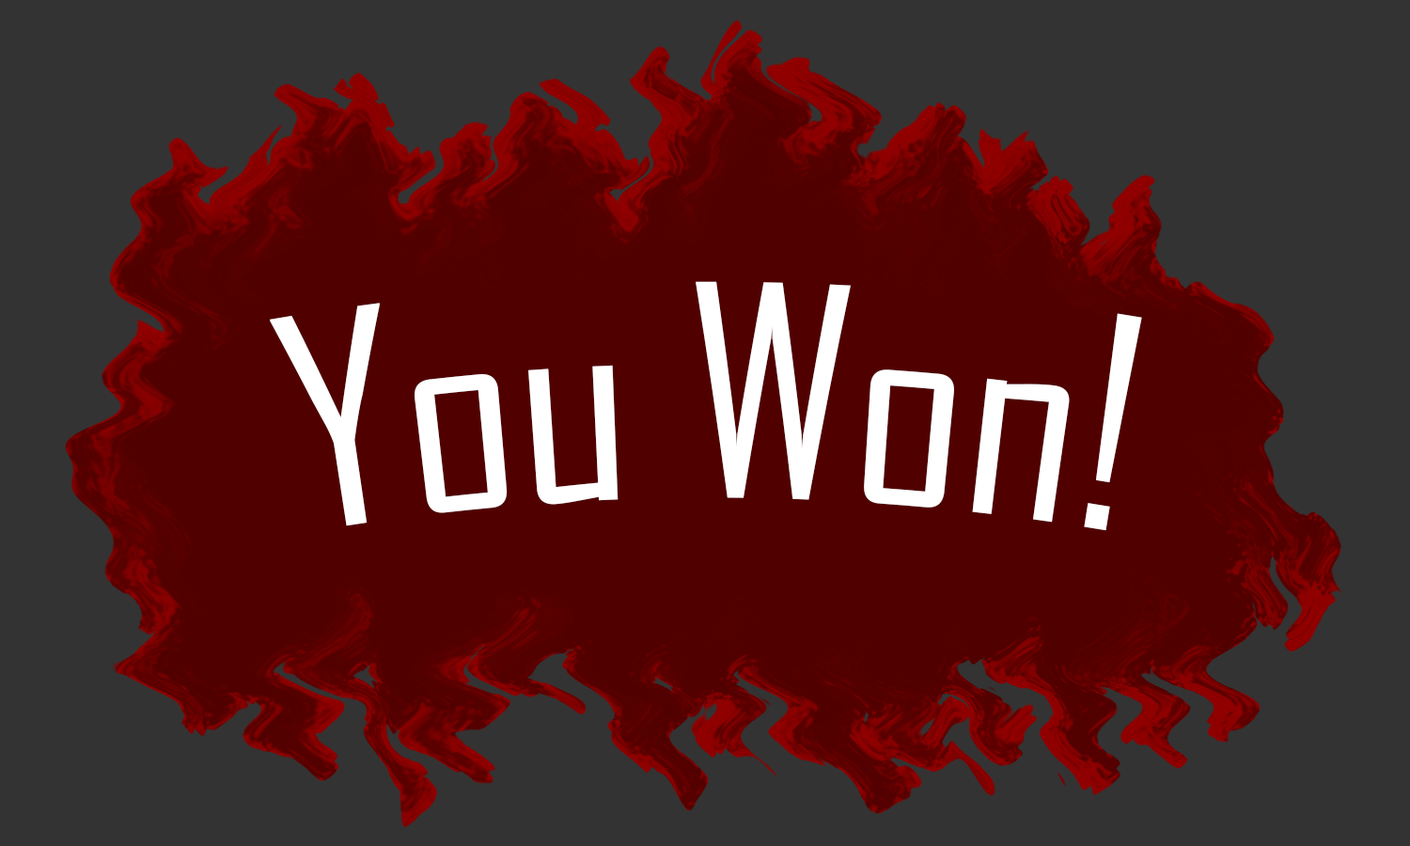
<style>
.page{position:relative;width:1410px;height:846px;background:#333333}
.page>*{position:absolute;margin:0}
.t1{font:281.9px "AgencyFB-Reg";color:#ffffff}
</style>
<div class="page">
<p class="t1" style="left:270px;top:281px;width:872px;height:250px">You Won!</p>
</div>
